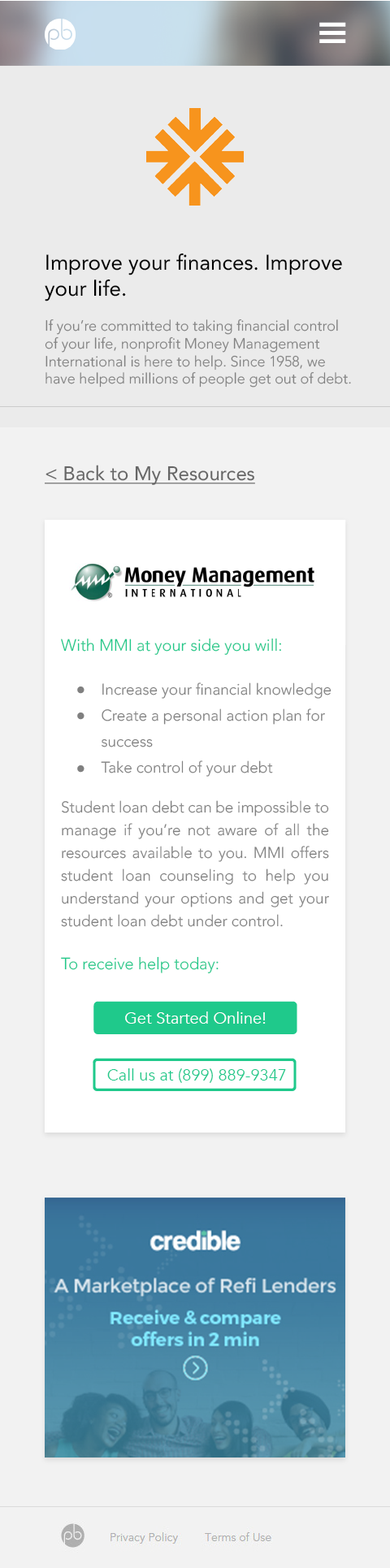
<style>
.page{position:relative;width:390px;height:1568px;background:#ffffff}
.page>*{position:absolute;margin:0}
.t1{font:21.1px "AvenirLTStd-Roman";color:#000000}
.t2{font:14.6px "AvenirLTStd-Light";color:#808080}
.t3{font:19.5px "AvenirLTStd-Roman";color:#666666;text-decoration:underline}
.t4{font:16.2px "AvenirLTStd-Light";color:#1fc98b}
.t5{font:15.4px/26px "AvenirLTStd-Light";color:#808080}
.t6{font:15.4px/22.7px "AvenirLTStd-Light";color:#808080}
.t7{font:16.2px "Avenir-Book";color:#ffffff}
.t8{font:16.2px "Avenir-Book";color:#1fc98b}
</style>
<div class="page">
<p class="t1" style="left:45px;top:253px;width:297px;height:48px">Improve your finances. Improve<br>your life.</p>
<p class="t2" style="left:45px;top:319px;width:306px;height:69px">If you’re committed to taking financial control<br>of your life, nonprofit Money Management<br>International is here to help. Since 1958, we<br>have helped millions of people get out of debt.</p>
<p class="t3" style="left:45px;top:465px;width:210px;height:20px">&lt; Back to My Resources</p>
<p class="t4" style="left:61px;top:638px;width:220px;height:17px">With MMI at your side you will:</p>
<p class="t5" style="left:101px;top:682px;width:230px;height:95px;text-align:justify"><span class="t6">          </span>Increase your financial knowledge<br>          Create a personal action plan for<br>          success<br>          Take control of your debt</p>
<p class="t6" style="left:61px;top:800px;width:268px;height:127px;text-align:justify">Student loan debt can be impossible to manage if you’re not aware of all the resources available to you. MMI offers student loan counseling to help you understand your options and get your student loan debt under control.</p>
<p class="t4" style="left:61px;top:956px;width:158px;height:17px">To receive help today:</p>
<p class="t7" style="left:125px;top:1011px;width:141px;height:13px">Get Started Online!</p>
<p class="t8" style="left:107px;top:1068px;width:179px;height:15px">Call us at (899) 889-9347</p>
</div>
